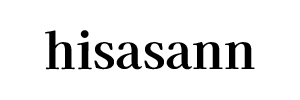
<style>
.page{position:relative;width:300px;height:100px;background:#ffffff}
.page>*{position:absolute;margin:0}
.t1{font:50px "KaiseiHarunoUmi-Bold";color:#000000}
</style>
<div class="page">
<p class="t1" style="left:45px;top:30px;width:210px;height:40px">hisasann</p>
</div>
